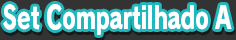
<style>
.page{position:relative;width:236px;height:40px;background:#333333}
.page>*{position:absolute;margin:0}
.t1{font:30.7px "RodinPro-EB";letter-spacing:-0.024em;color:#ffffff;scale:0.71 1}
</style>
<div class="page">
<p class="t1" style="left:3px;top:4px;width:229px;height:31px">Set Compartilhado A</p>
</div>
